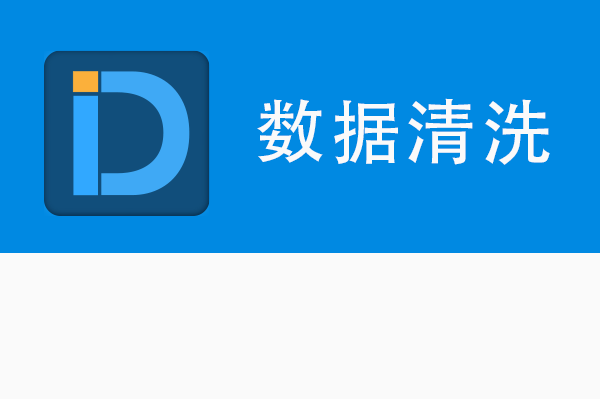
<style>
.page{position:relative;width:600px;height:400px;background:#0089e2}
.page>*{position:absolute;margin:0}
.t1{font:72px "AdobeHeitiStd-Regular";letter-spacing:0.052em;color:#fafafa}
</style>
<div class="page">
<p class="t1" style="left:257px;top:98px;width:293px;height:67px">数据清洗</p>
</div>
